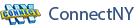
<style>
.page{position:relative;width:139px;height:25px;background:#ffffff}
.page>*{position:absolute;margin:0}
.t1{font:18px "MyriadPro-Regular";color:#375382}
</style>
<div class="page">
<p class="t1" style="left:49px;top:7px;width:85px;height:13px">ConnectNY</p>
</div>
